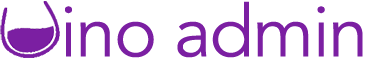
<style>
.page{position:relative;width:367px;height:61px;background:#ffffff}
.page>*{position:absolute;margin:0}
.t1{font:72px "Avenir-Book";letter-spacing:-0.02em;color:#7b1fa2}
</style>
<div class="page">
<p class="t1" style="left:65px;top:1px;width:298px;height:57px">ino admin</p>
</div>
